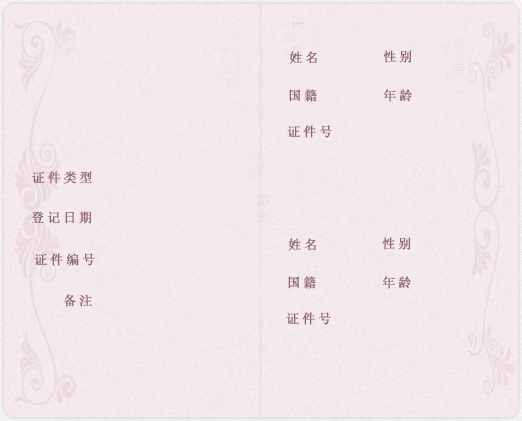
<style>
.page{position:relative;width:522px;height:421px;background:#f4e9ed}
.page>*{position:absolute;margin:0}
.t1{font:13px "SimSun";letter-spacing:0.2em;color:#8d6275;font-weight:bold}
</style>
<div class="page">
<p class="t1" style="left:289px;top:51px;width:28px;height:13px">姓名</p>
<p class="t1" style="left:383px;top:50px;width:29px;height:13px">性别</p>
<p class="t1" style="left:289px;top:89px;width:28px;height:13px">国籍</p>
<p class="t1" style="left:383px;top:89px;width:29px;height:13px">年龄</p>
<p class="t1" style="left:287px;top:125px;width:45px;height:13px">证件号</p>
<p class="t1" style="left:32px;top:171px;width:60px;height:13px">证件类型</p>
<p class="t1" style="left:32px;top:211px;width:60px;height:13px">登记日期</p>
<p class="t1" style="left:288px;top:238px;width:28px;height:13px">姓名</p>
<p class="t1" style="left:382px;top:237px;width:29px;height:13px">性别</p>
<p class="t1" style="left:34px;top:253px;width:61px;height:13px">证件编号</p>
<p class="t1" style="left:288px;top:276px;width:28px;height:13px">国籍</p>
<p class="t1" style="left:382px;top:276px;width:29px;height:13px">年龄</p>
<p class="t1" style="left:63px;top:294px;width:29px;height:13px">备注</p>
<p class="t1" style="left:286px;top:312px;width:45px;height:13px">证件号</p>
</div>
